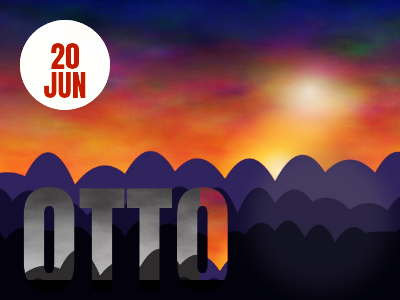
<style>
.page{position:relative;width:400px;height:300px}
.page>*{position:absolute;margin:0}
.t1{font:30px/28.5px "Anton-Regular";color:#c21b05}
.t2{font:120px "Anton-Regular"}
</style>
<div class="page">
<p class="t1" style="left:17px;top:31px;width:96px;height:77px;text-align:center">20<br>JUN</p>
<p class="t2" style="left:17px;top:147px;width:366px;height:153px">OTTO</p>
</div>
